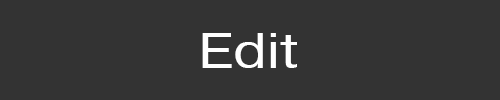
<style>
.page{position:relative;width:500px;height:100px;background:#333333}
.page>*{position:absolute;margin:0}
.t1{font:48px "Helvetica";color:#ffffff;scale:1.2 1}
</style>
<div class="page">
<p class="t1" style="left:202px;top:33px;width:95px;height:35px">Edit</p>
</div>
